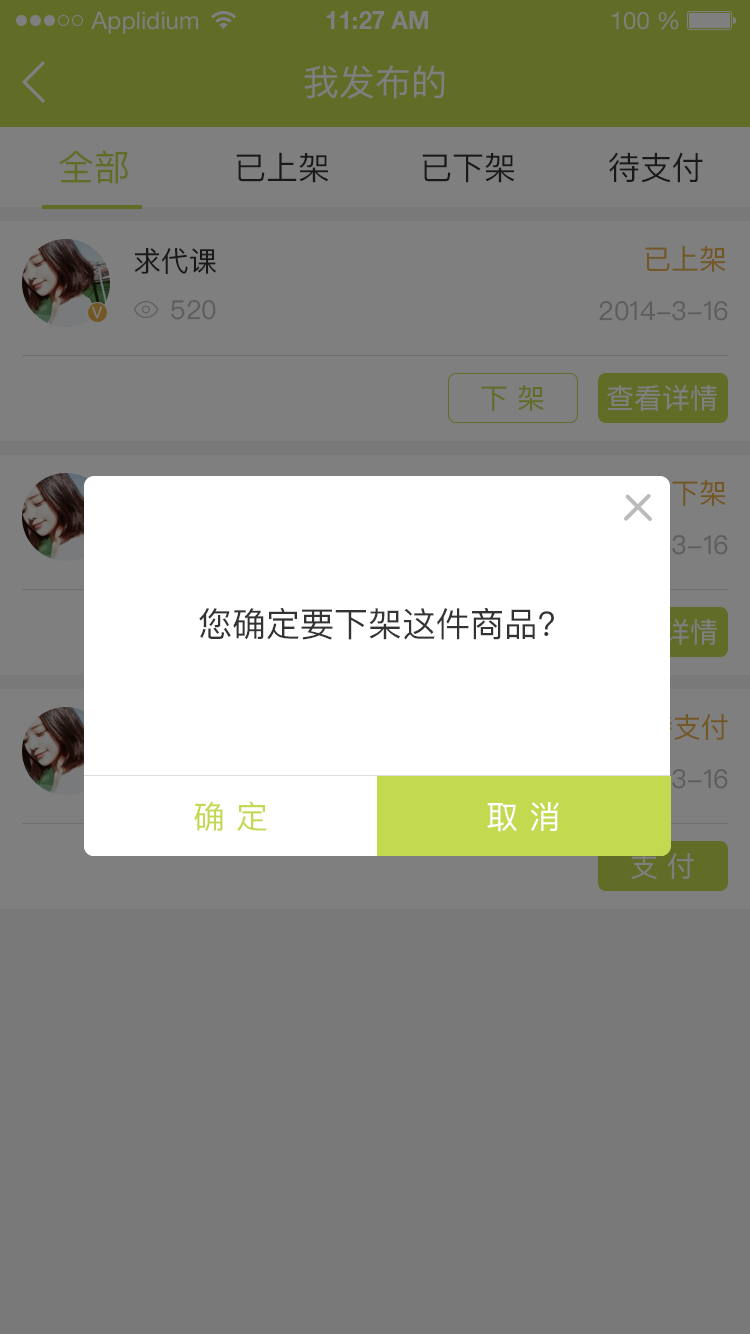
<style>
.page{position:relative;width:750px;height:1334px;background:#797979}
.page>*{position:absolute;margin:0}
.t1{font:24px "HelveticaNeueLTStd-Roman";color:#7f7f7f}
.t2{font:24px "HelveticaNeueLTStd-Bd";color:#7f7f7f}
.t3{font:36px "PingFangSC-Regular";color:#7f7f7f}
.t4{font:36px "PingFangSC-Regular";color:#616c27}
.t5{font:32px "PingFangSC-Regular";color:#191919}
.t6{font:28px "PingFangSC-Regular";color:#735825}
.t7{font:28px "PingFangSC-Regular";color:#191919}
.t8{font:26px "PingFangSC-Regular";color:#5d5d5d}
.t9{font:15.9px "PingFangSC-Regular";color:#7f7f7f}
.t10{font:28px "PingFangSC-Regular";color:#616c27}
.t11{font:28px "PingFangSC-Regular";color:#7f7f7f}
.t12{font:34px "PingFangSC-Regular";color:#333333}
.t13{font:32px "PingFangSC-Regular";color:#c3d94f}
.t14{font:32px "PingFangSC-Regular";color:#ffffff}
</style>
<div class="page">
<p class="t1" style="left:91px;top:11px;width:107px;height:23px">Applidium</p>
<p class="t2" style="left:326px;top:11px;width:102px;height:18px">11:27 AM</p>
<p class="t1" style="left:612px;top:11px;width:67px;height:19px">100 %</p>
<p class="t3" style="left:304px;top:65px;width:141px;height:34px">我发布的</p>
<p class="t4" style="left:59px;top:150px;width:69px;height:34px">全部</p>
<p class="t5" style="left:236px;top:152px;width:93px;height:31px">已上架</p>
<p class="t5" style="left:422px;top:153px;width:93px;height:30px">已下架</p>
<p class="t5" style="left:609px;top:152px;width:94px;height:31px">待支付</p>
<p class="t6" style="left:645px;top:246px;width:81px;height:26px">已上架</p>
<p class="t7" style="left:134px;top:247px;width:82px;height:27px">求代课</p>
<p class="t8" style="left:171px;top:300px;width:45px;height:20px">520</p>
<p class="t8" style="left:599px;top:301px;width:129px;height:20px">2014-3-16</p>
<p class="t9" style="left:92px;top:306px;width:11px;height:13px">V</p>
<p class="t10" style="left:481px;top:385px;width:63px;height:26px">下 架</p>
<p class="t11" style="left:607px;top:385px;width:110px;height:26px">查看详情</p>
<p class="t12" style="left:199px;top:608px;width:355px;height:32px">您确定要下架这件商品？</p>
<p class="t13" style="left:194px;top:801px;width:73px;height:31px">确 定</p>
<p class="t14" style="left:487px;top:802px;width:72px;height:30px">取 消</p>
<p class="t11" style="left:631px;top:852px;width:63px;height:27px">支 付</p>
</div>
